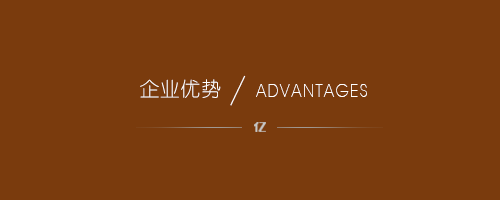
<style>
.page{position:relative;width:500px;height:200px;background:#7a3b0d}
.page>*{position:absolute;margin:0}
.t1{font:35px "YouYuan";letter-spacing:0.025em;color:#ffffff}
.t2{font:20px "YouYuan";letter-spacing:0.025em;color:#ffffff}
.t3{font:18px "AvantGardeLT-ExtraLight";letter-spacing:0.1em;color:#ffffff;scale:0.83 1}
</style>
<div class="page">
<p class="t1" style="left:230px;top:75px;width:16px;height:31px">/</p>
<p class="t2" style="left:140px;top:79px;width:81px;height:19px">企业优势</p>
<p class="t3" style="left:256px;top:84px;width:111px;height:13px">ADVANTAGES</p>
</div>
